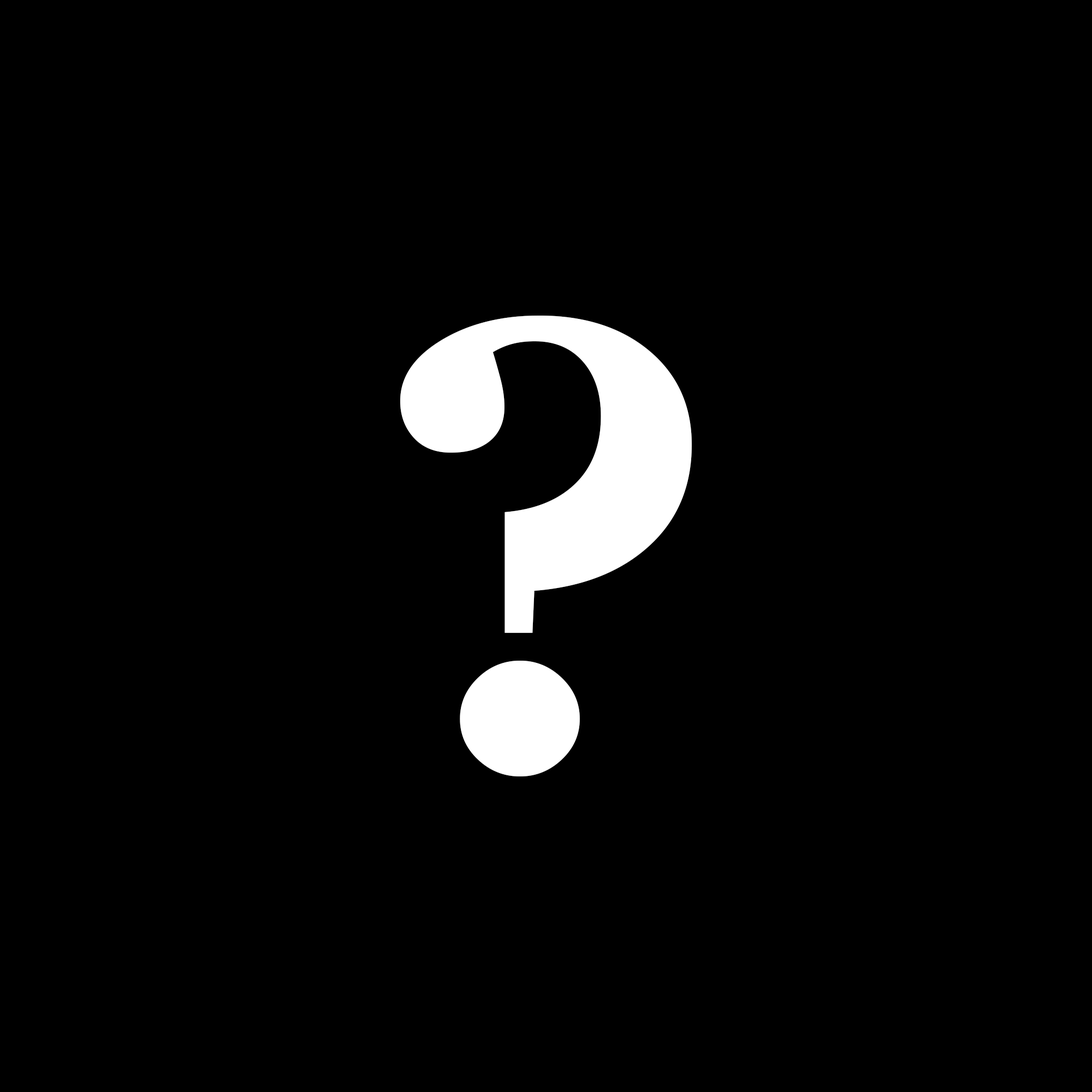
<style>
.page{position:relative;width:1092px;height:1092px;background:#000000}
.page>*{position:absolute;margin:0}
.t1{font:637px "Georgia-Bold";color:#ffffff}
</style>
<div class="page">
<p class="t1" style="left:400px;top:316px;width:292px;height:460px">?</p>
</div>
